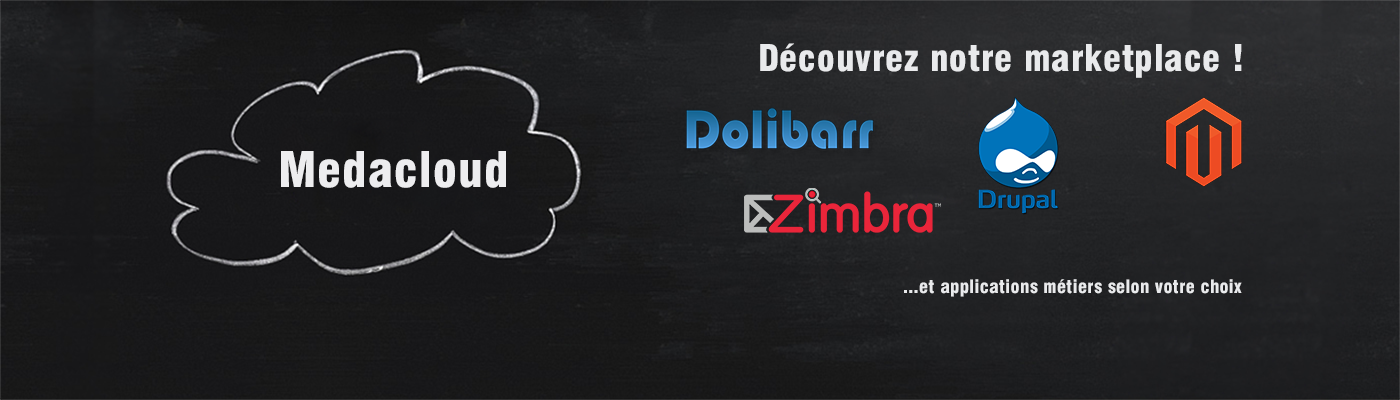
<style>
.page{position:relative;width:1400px;height:400px}
.page>*{position:absolute;margin:0}
.t1{font:36px "Swiss721BT-BlackCondensed";letter-spacing:0.025em;color:#e9eaec}
.t2{font:48px "Swiss721BT-BlackCondensed";letter-spacing:0.025em;color:#ededef}
.t3{font:18px "Swiss721BT-BlackCondensed";letter-spacing:0.025em;color:#e9eaec}
</style>
<div class="page">
<p class="t1" style="left:760px;top:43px;width:482px;height:35px">Découvrez notre marketplace !</p>
<p class="t2" style="left:281px;top:151px;width:225px;height:37px">Medacloud</p>
<p class="t3" style="left:904px;top:279px;width:338px;height:18px">...et applications métiers selon votre choix</p>
</div>
